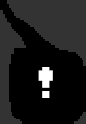
<style>
.page{position:relative;width:86px;height:124px;background:#000000}
.page>*{position:absolute;margin:0}
.t1{font:55px "FixedsysExcelsiorIIIb";letter-spacing:0.121em;color:#ffffff}
</style>
<div class="page">
<p class="t1" style="left:38px;top:67px;width:15px;height:31px">!</p>
</div>
